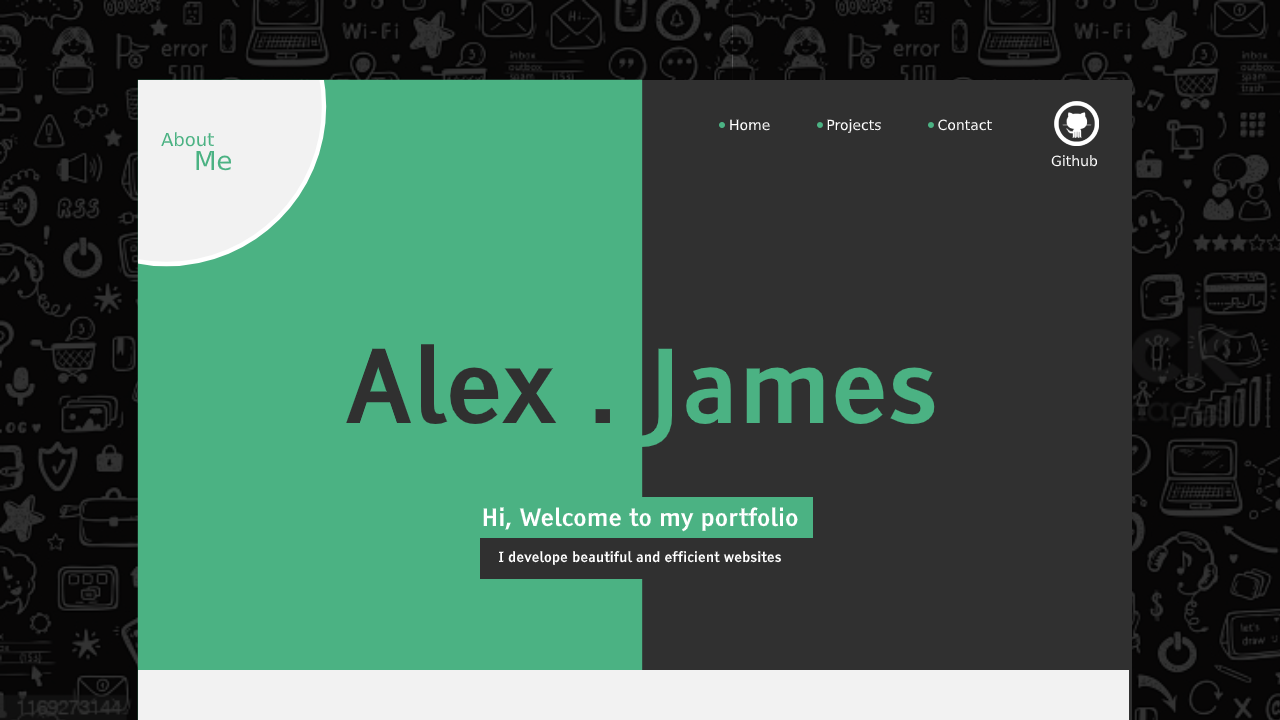
<style>
.page{position:relative;width:1280px;height:720px;background:#303030}
.page>*{position:absolute;margin:0}
.t1{font:14px "DejaVuSans";color:#ffffff}
.t2{font:18px "DejaVuSans";color:#4bb283}
.t3{font:26px "DejaVuSans";color:#4bb283}
.t4{font:24px "TiresiasInfofont";color:#ffffff}
.t5{font:14px "TiresiasInfofont";color:#000000}
.t6{font:14px "TiresiasInfofont";color:#ffffff}
</style>
<div class="page">
<p class="t1" style="left:730px;top:119px;width:262px;height:14px">Home  Projects  Contact</p>
<p class="t2" style="left:161px;top:132px;width:53px;height:15px">About</p>
<p class="t2" style="left:161px;top:132px;width:53px;height:15px">About</p>
<p class="t3" style="left:196px;top:151px;width:36px;height:20px">Me</p>
<p class="t3" style="left:196px;top:151px;width:36px;height:20px">Me</p>
<p class="t1" style="left:1051px;top:155px;width:47px;height:12px">Github</p>
<p class="t4" style="left:483px;top:507px;width:315px;height:25px"><span class="t5"><br><br></span>Hi, Welcome to my portfolio</p>
<p class="t6" style="left:499px;top:551px;width:283px;height:14px">I develope beautiful and efficient websites</p>
</div>
